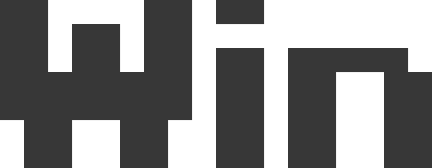
<style>
.page{position:relative;width:432px;height:168px;background:#373737}
.page>*{position:absolute;margin:0}
.t1{font:216px "PixeloidSans-Bold";color:#373737}
</style>
<div class="page">
<p class="t1" style="left:0px;top:0px;width:432px;height:168px">Win</p>
</div>
